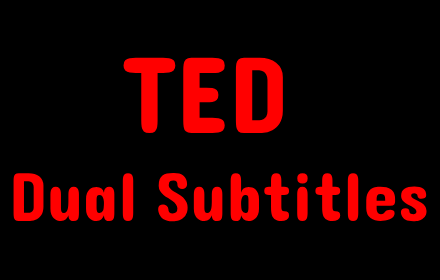
<style>
.page{position:relative;width:440px;height:280px;background:#000000}
.page>*{position:absolute;margin:0}
.t1{font:110px "Dangrek-Regular";color:#ff0000}
.t2{font:70px "Dangrek-Regular";color:#ff0000}
</style>
<div class="page">
<p class="t1" style="left:123px;top:57px;width:160px;height:76px">TED</p>
<p class="t2" style="left:13px;top:172px;width:414px;height:50px">Dual Subtitles</p>
</div>
